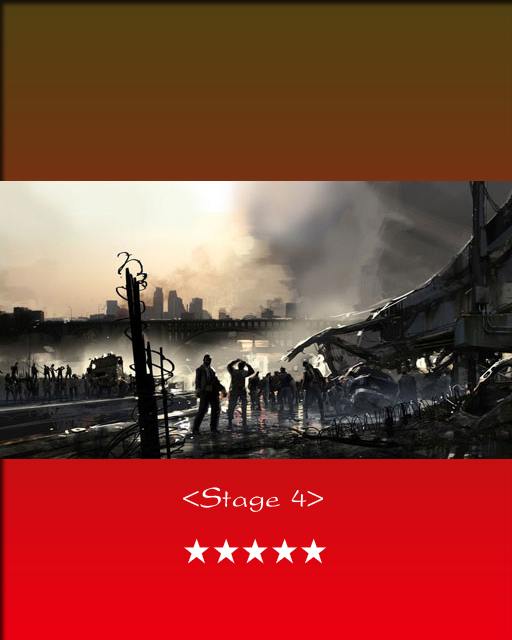
<style>
.page{position:relative;width:512px;height:640px}
.page>*{position:absolute;margin:0}
.t1{font:30px "Yj-NANCHO-Medium";color:#ffffff}
</style>
<div class="page">
<p class="t1" style="left:183px;top:487px;width:143px;height:77px">&lt;Stage 4&gt;<br>★★★★★</p>
</div>
